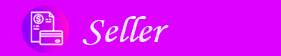
<style>
.page{position:relative;width:281px;height:56px;background:#dd01ff}
.page>*{position:absolute;margin:0}
.t1{font:37.5px "MonotypeCorsiva";color:#edeafe;scale:1.12 1}
</style>
<div class="page">
<p class="t1" style="left:82px;top:16px;width:87px;height:29px">Seller</p>
</div>
